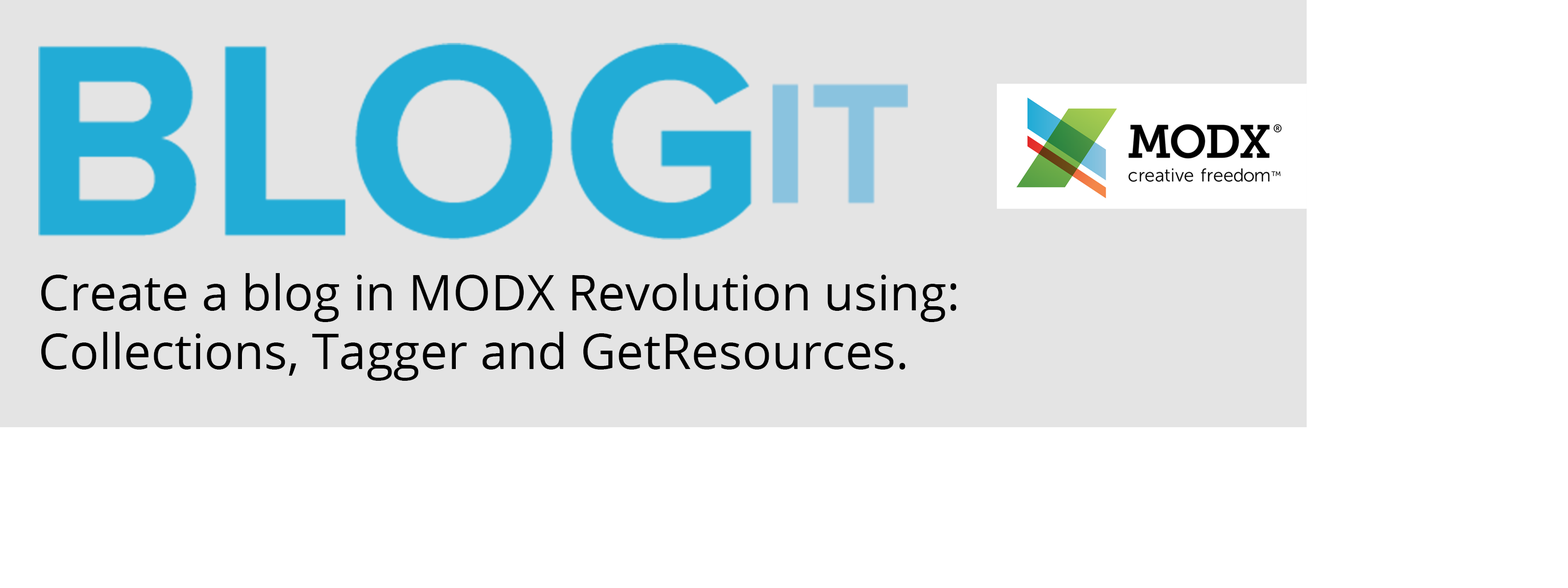
<style>
.page{position:relative;width:1568px;height:588px;background:#ffffff}
.page>*{position:absolute;margin:0}
.t1{font:49px "OpenSans";color:#000000}
</style>
<div class="page">
<p class="t1" style="left:41px;top:273px;width:916px;height:108px">Create a blog in MODX Revolution using: <br>Collections, Tagger and GetResources.</p>
</div>
